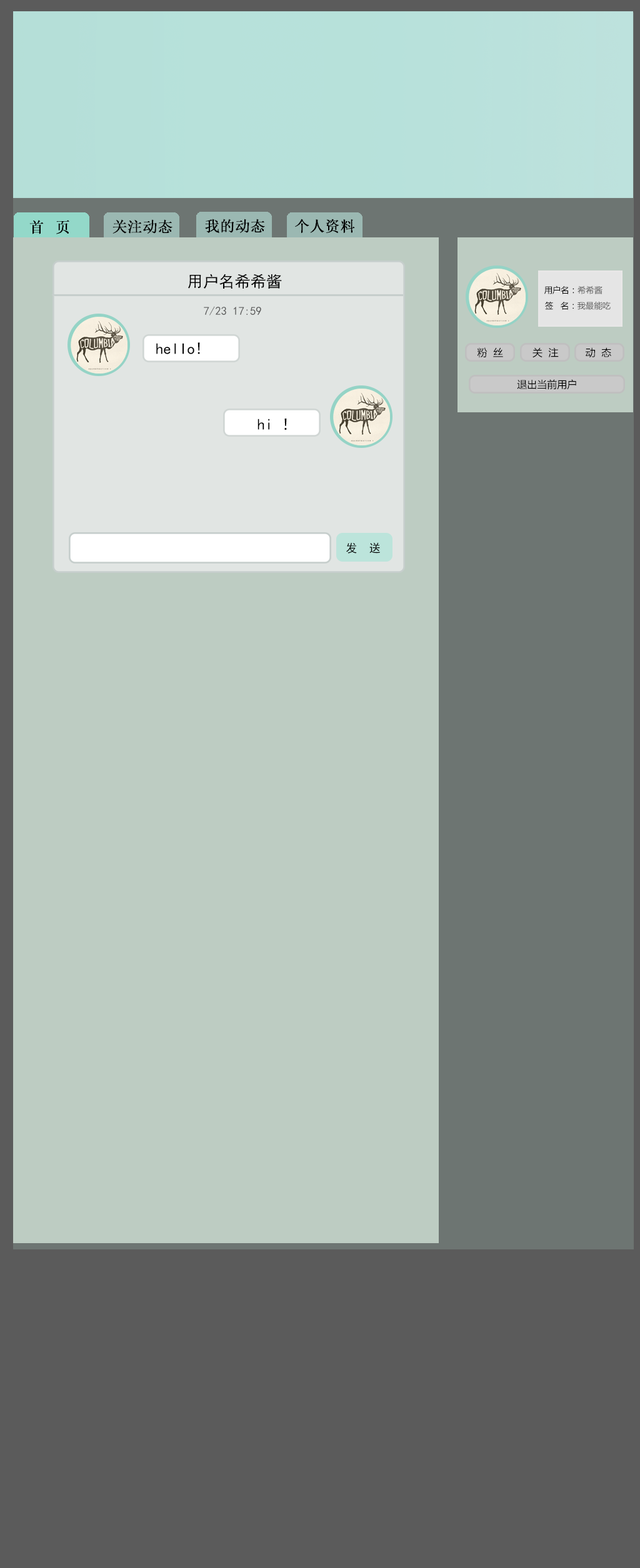
<style>
.page{position:relative;width:640px;height:1568px;background:#bdccc2}
.page>*{position:absolute;margin:0}
.t1{font:15px "System";color:#000000}
.t2{font:15.8px "SimHei";color:#000000}
.t3{font:8.3px "MicrosoftYaHei";color:#000000}
.t4{font:8.3px "MicrosoftYaHei";color:#5b5b5b}
.t5{font:11.7px "SimHei";color:#5d5d5d}
.t6{font:10px "MicrosoftYaHei";color:#010101}
.t7{font:7.5px "MicrosoftYaHei";color:#000000}
.t8{font:11.7px "SimHei";color:#000000}
</style>
<div class="page">
<p class="t1" style="left:29px;top:220px;width:40px;height:14px">首   页</p>
<p class="t1" style="left:112px;top:219px;width:60px;height:15px">关注动态</p>
<p class="t1" style="left:205px;top:219px;width:60px;height:14px">我的动态</p>
<p class="t1" style="left:295px;top:219px;width:60px;height:14px">个人资料</p>
<p class="t2" style="left:188px;top:274px;width:94px;height:15px">用户名希希酱</p>
<p class="t3" style="left:544px;top:285px;width:58px;height:9px">用户名：<span class="t4">希希酱</span></p>
<p class="t3" style="left:545px;top:301px;width:65px;height:9px">签   名：<span class="t4">我最能吃</span></p>
<p class="t5" style="left:204px;top:306px;width:57px;height:9px">7/23 17:59</p>
<p class="t2" style="left:156px;top:342px;width:44px;height:12px">hello!</p>
<p class="t6" style="left:477px;top:347px;width:26px;height:11px">粉  丝</p>
<p class="t7" style="left:532px;top:347px;width:26px;height:11px">关  注</p>
<p class="t7" style="left:585px;top:347px;width:26px;height:11px">动  态</p>
<p class="t7" style="left:517px;top:379px;width:59px;height:11px">退出当前用户</p>
<p class="t2" style="left:257px;top:419px;width:30px;height:11px">hi ！</p>
<p class="t8" style="left:346px;top:542px;width:34px;height:11px">发  送</p>
</div>
